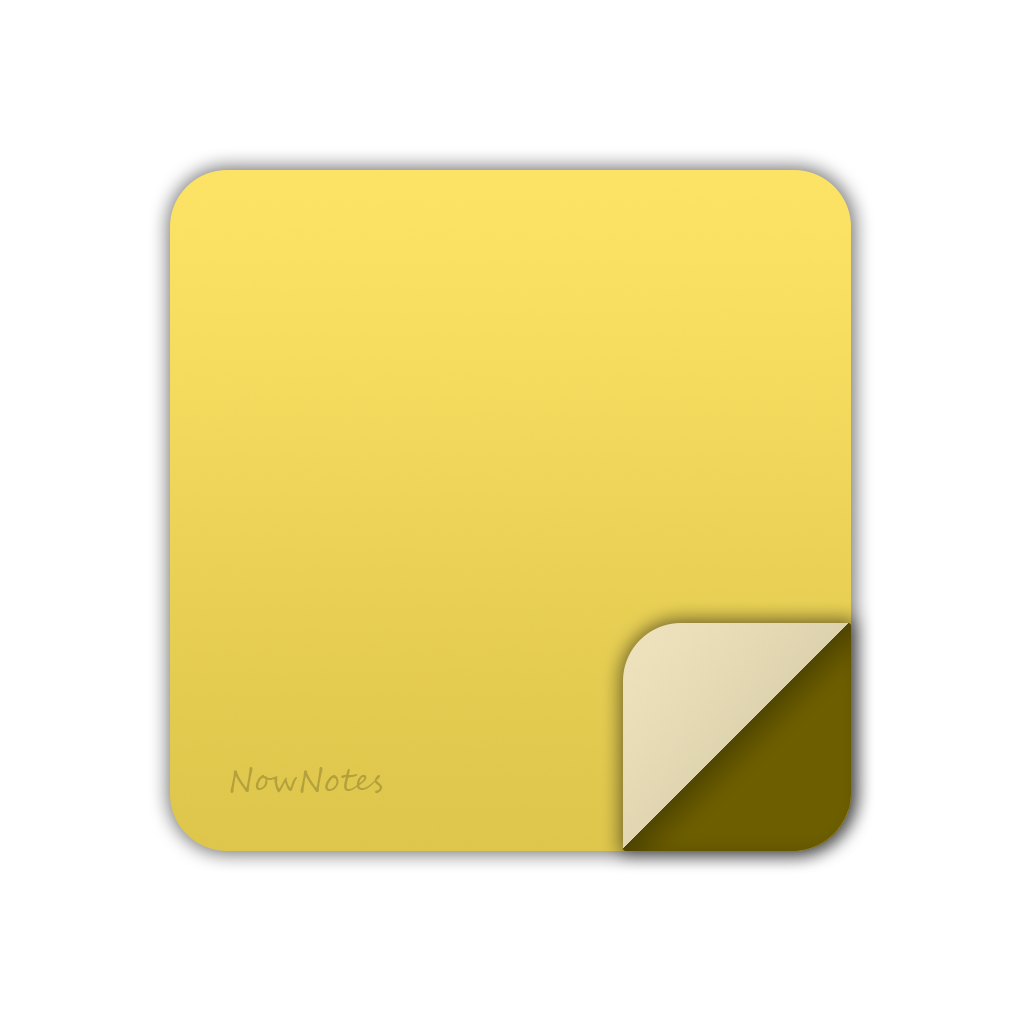
<style>
.page{position:relative;width:1024px;height:1024px;background:#ffffff}
.page>*{position:absolute;margin:0}
.t1{font:31.2px "SegoeScript";color:#b5a13c}
</style>
<div class="page">
<p class="t1" style="left:230px;top:767px;width:153px;height:26px">NowNotes</p>
</div>
